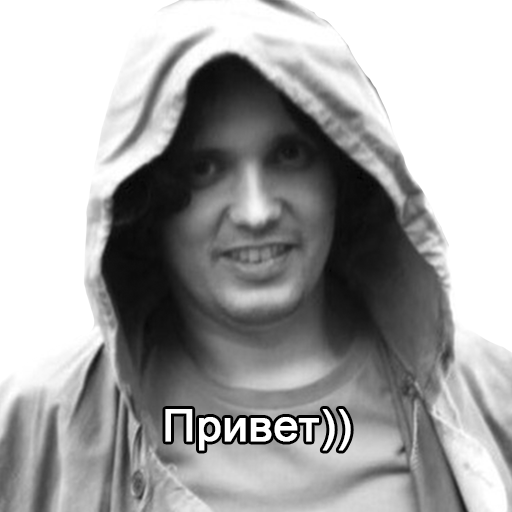
<style>
.page{position:relative;width:512px;height:512px;background:#ffffff}
.page>*{position:absolute;margin:0}
.t1{font:45px "ArialMT";color:#ffffff;font-weight:bold}
</style>
<div class="page">
<p class="t1" style="left:165px;top:409px;width:186px;height:42px">Привет))</p>
</div>
